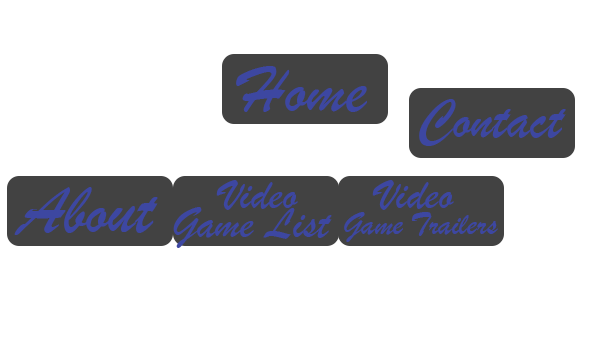
<style>
.page{position:relative;width:600px;height:360px;background:#ffffff}
.page>*{position:absolute;margin:0}
.t1{font:70px "BrushScriptMT";color:#3d47a1}
.t2{font:58.3px "BrushScriptMT";color:#3d47a1}
.t3{font:45px "BrushScriptMT";color:#3d47a1}
.t4{font:33.3px "BrushScriptMT";color:#3d47a1}
</style>
<div class="page">
<p class="t1" style="left:236px;top:66px;width:131px;height:46px">Home</p>
<p class="t2" style="left:419px;top:99px;width:147px;height:47px">Contact</p>
<p class="t3" style="left:216px;top:180px;width:82px;height:30px">Video</p>
<p class="t3" style="left:372px;top:180px;width:82px;height:30px">Video</p>
<p class="t1" style="left:14px;top:187px;width:144px;height:48px">About</p>
<p class="t3" style="left:173px;top:207px;width:159px;height:41px">Game List</p>
<p class="t4" style="left:344px;top:212px;width:154px;height:30px">Game Trailers</p>
</div>
